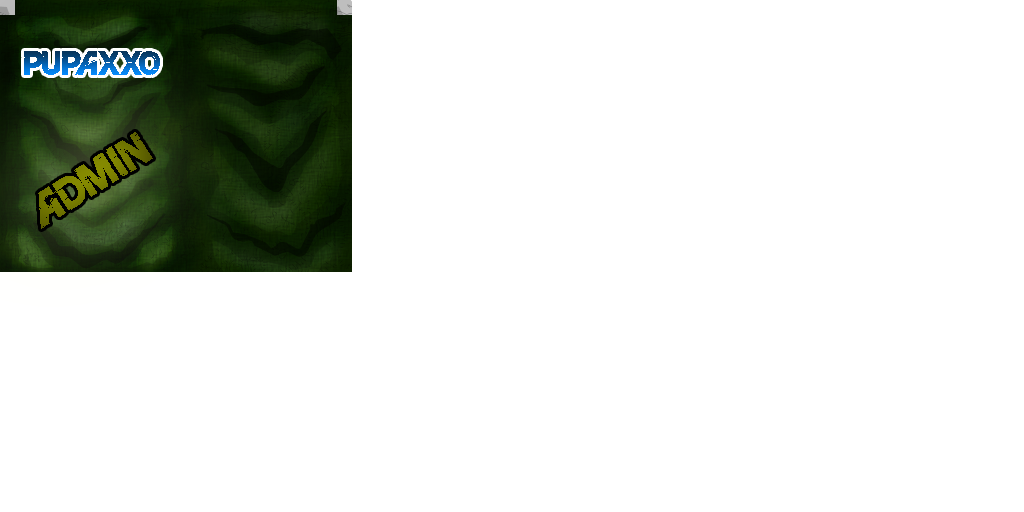
<style>
.page{position:relative;width:1024px;height:512px;background:#ffffff}
.page>*{position:absolute;margin:0}
.t1{font:30px "FarCryExtraBold"}
.t2{font:40px "FarCryExtraBold";color:#787c00}
</style>
<div class="page">
<p class="t1" style="left:24px;top:51px;width:136px;height:24px">PUPAXXO</p>
<p class="t2" style="left:38px;top:132px;width:115px;height:97px;rotate:-32deg">ADMIN</p>
</div>
